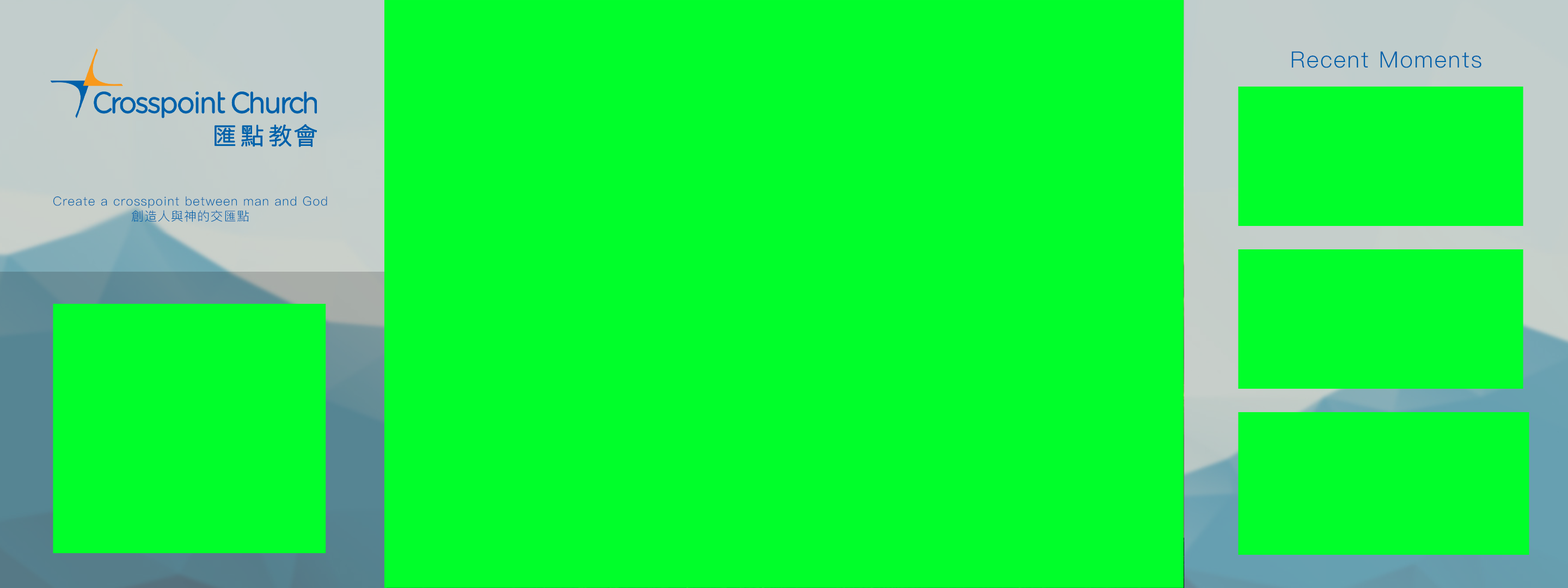
<style>
.page{position:relative;width:1568px;height:588px;background:#00ff2a}
.page>*{position:absolute;margin:0}
.t1{font:22.5px "PingFangSC-Light";letter-spacing:0.06em;color:#0061aa}
.t2{font:12.5px "PingFangSC-Light";letter-spacing:0.06em;color:#0061aa}
</style>
<div class="page">
<p class="t1" style="left:1291px;top:51px;width:190px;height:17px">Recent Moments</p>
<p class="t2" style="left:53px;top:196px;width:274px;height:26px;text-align:center">Create a crosspoint between man and God<br>創造人與神的交匯點</p>
</div>
